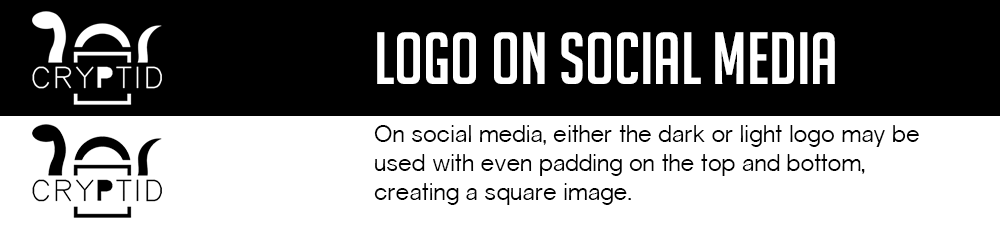
<style>
.page{position:relative;width:1000px;height:250px;background:#ffffff}
.page>*{position:absolute;margin:0}
.t1{font:72px "BigNoodleTitling";color:#ffffff}
.t2{font:24px "Gravity-Book";color:#000000}
</style>
<div class="page">
<p class="t1" style="left:377px;top:32px;width:458px;height:52px">Logo ON SOCIAL MEDIA</p>
<p class="t2" style="left:374px;top:125px;width:545px;height:80px">On social media, either the dark or light logo may be used with even padding on the top and bottom, creating a square image.</p>
</div>
